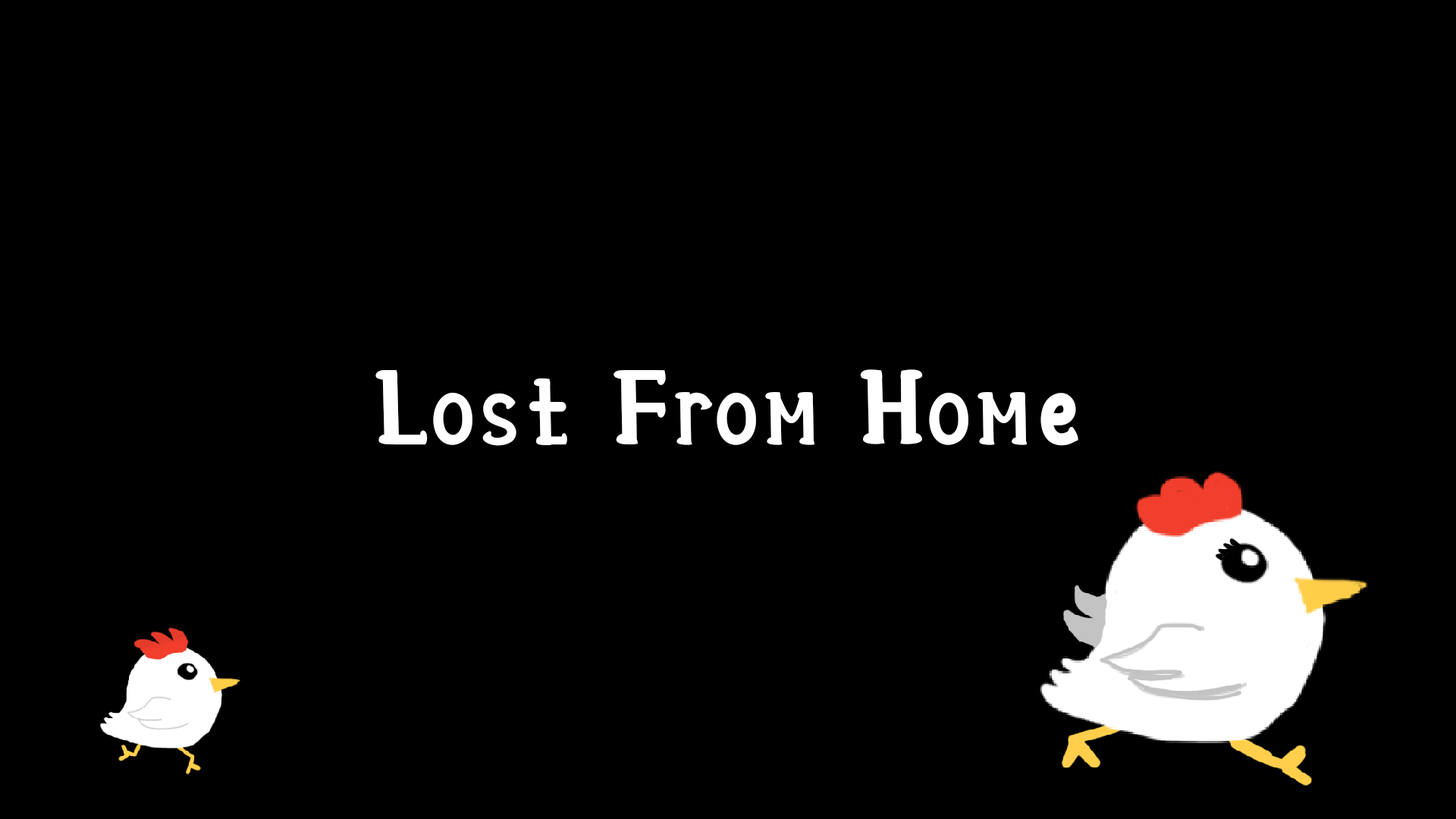
<style>
.page{position:relative;width:1456px;height:819px;background:#000000}
.page>*{position:absolute;margin:0}
.t1{font:110.2px "DickyDance";letter-spacing:0.05em;color:#ffffff}
</style>
<div class="page">
<p class="t1" style="left:375px;top:369px;width:703px;height:77px">Lost From Home</p>
</div>
